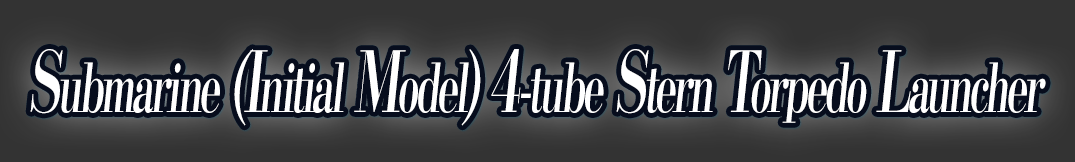
<style>
.page{position:relative;width:1075px;height:162px;background:#333333}
.page>*{position:absolute;margin:0}
.t1{font:67.2px "KochoStd-Heavy";letter-spacing:-0.08em;color:#ffffff;font-style:italic;scale:0.59 1}
.t2{font:84px "KochoStd-Heavy";letter-spacing:-0.08em;color:#ffffff;font-style:italic;scale:0.59 1}
</style>
<div class="page">
<p class="t1" style="left:30px;top:49px;width:1016px;height:77px"><span class="t2">S</span>ubmarine<span class="t2"> (I</span>nitial<span class="t2"> M</span>odel<span class="t2">) 4</span>-tube<span class="t2"> S</span>tern<span class="t2"> T</span>orpedo<span class="t2"> L</span>auncher</p>
</div>
